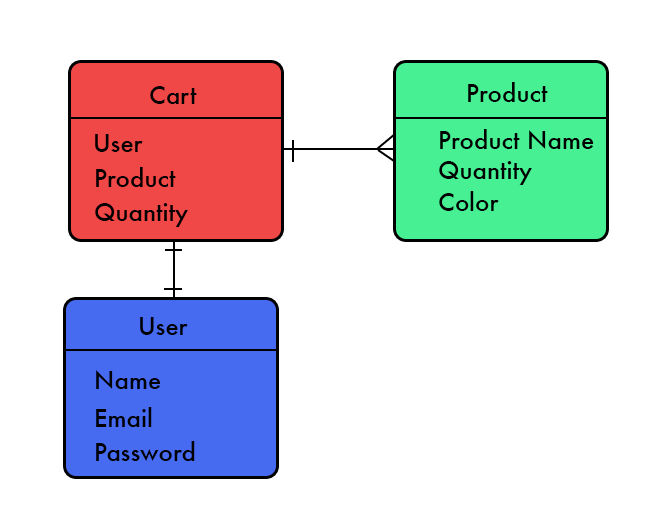
<style>
.page{position:relative;width:664px;height:516px;background:#ffffff}
.page>*{position:absolute;margin:0}
.t1{font:24px "Futura-Medium";color:#010101}
.t2{font:24px "Futura-Medium";color:#000000}
</style>
<div class="page">
<p class="t1" style="left:150px;top:86px;width:47px;height:18px">Cart</p>
<p class="t2" style="left:468px;top:82px;width:80px;height:20px">Product</p>
<p class="t2" style="left:95px;top:134px;width:48px;height:18px">User</p>
<p class="t2" style="left:440px;top:129px;width:154px;height:20px">Product Name</p>
<p class="t2" style="left:439px;top:161px;width:93px;height:24px">Quantity</p>
<p class="t2" style="left:96px;top:167px;width:80px;height:20px">Product</p>
<p class="t2" style="left:439px;top:191px;width:60px;height:20px">Color</p>
<p class="t2" style="left:95px;top:203px;width:93px;height:24px">Quantity</p>
<p class="t2" style="left:140px;top:317px;width:48px;height:18px">User</p>
<p class="t2" style="left:96px;top:370px;width:65px;height:19px">Name</p>
<p class="t2" style="left:96px;top:407px;width:56px;height:20px">Email</p>
<p class="t2" style="left:96px;top:441px;width:99px;height:20px">Password</p>
</div>
